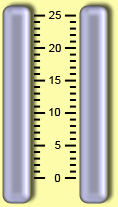
<style>
.page{position:relative;width:118px;height:207px;background:#fcfcaa}
.page>*{position:absolute;margin:0}
.t1{font:11.4px "ArialMT";color:#040404}
</style>
<div class="page">
<p class="t1" style="left:49px;top:11px;width:12px;height:8px">25</p>
<p class="t1" style="left:49px;top:44px;width:12px;height:8px">20</p>
<p class="t1" style="left:49px;top:76px;width:12px;height:8px">15</p>
<p class="t1" style="left:49px;top:108px;width:12px;height:8px">10</p>
<p class="t1" style="left:55px;top:141px;width:6px;height:8px">5</p>
<p class="t1" style="left:54px;top:174px;width:7px;height:8px">0</p>
</div>
